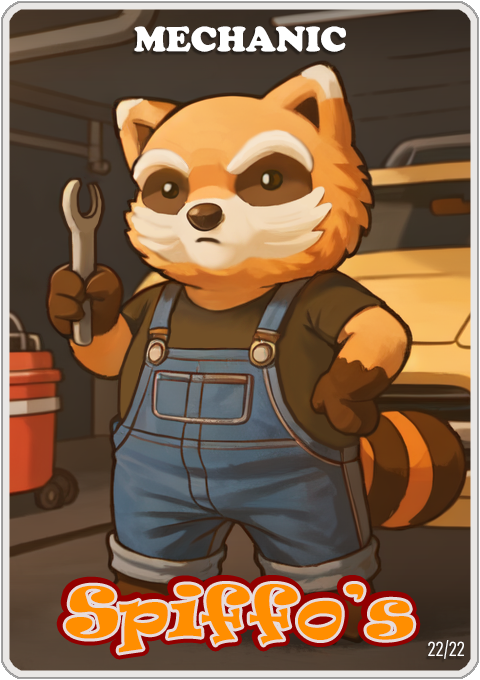
<style>
.page{position:relative;width:480px;height:680px}
.page>*{position:absolute;margin:0}
.t1{font:36px "CooperBlack";color:#ffffff}
.t2{font:65px "Ravie";color:#ff8e00}
.t3{font:20px "Bahnschrift-LightCondensed";color:#ffffff}
</style>
<div class="page">
<p class="t1" style="left:134px;top:26px;width:212px;height:26px">MECHANIC</p>
<p class="t2" style="left:65px;top:584px;width:349px;height:69px">Spiffo’s</p>
<p class="t3" style="left:428px;top:640px;width:36px;height:19px">22/22</p>
</div>
